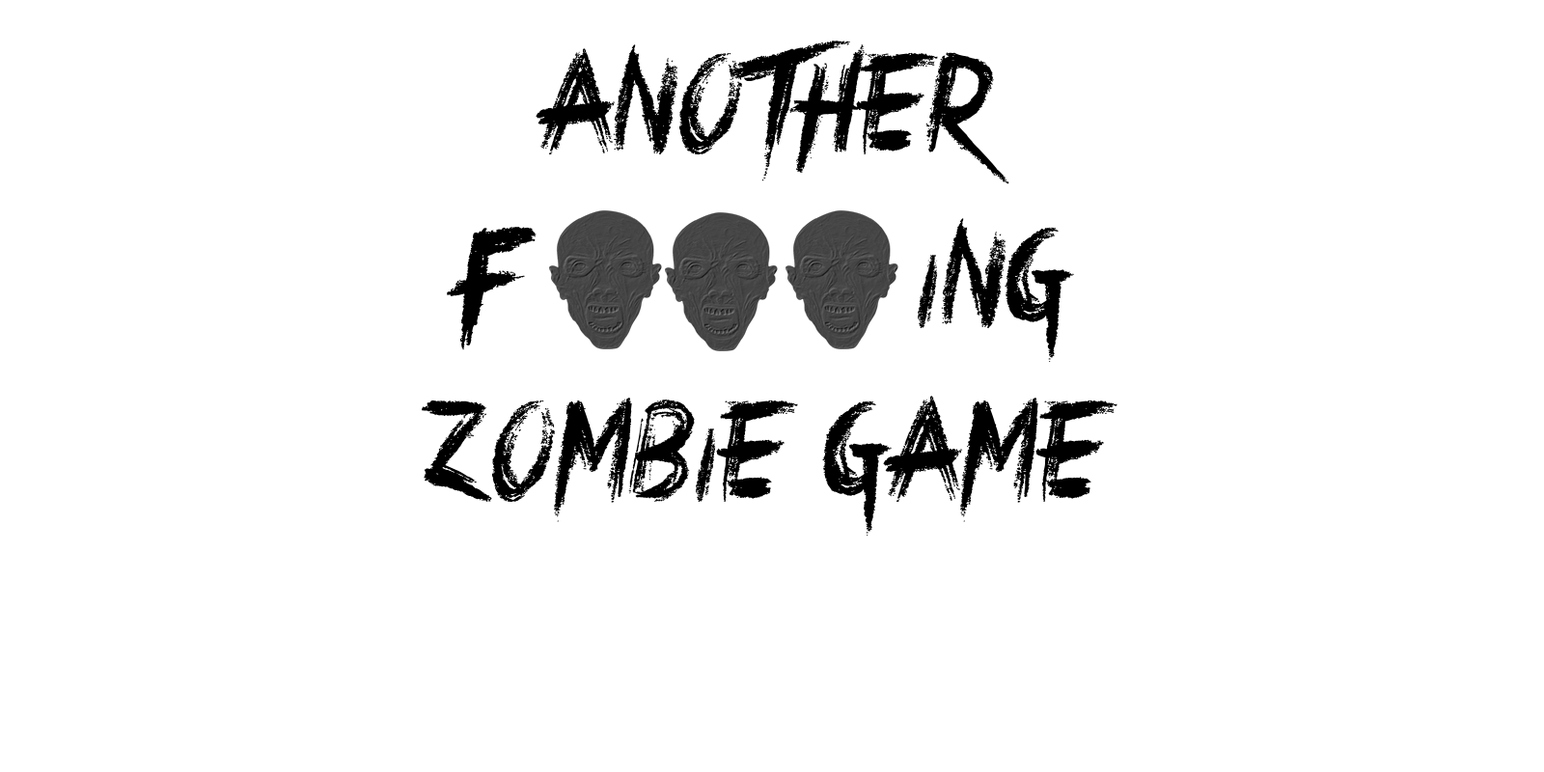
<style>
.page{position:relative;width:1544px;height:772px;background:#ffffff}
.page>*{position:absolute;margin:0}
.t1{font:144.8px "CrimesTimesSix";color:#000000}
</style>
<div class="page">
<p class="t1" style="left:422px;top:41px;width:696px;height:496px;text-align:center">Another<br>F           ing<br>Zombie Game</p>
</div>
